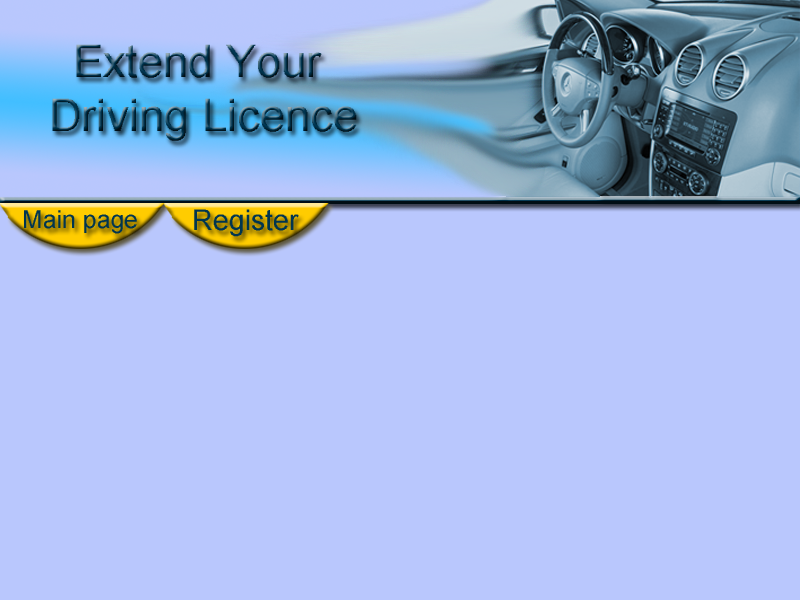
<style>
.page{position:relative;width:800px;height:600px;background:#b9c7fd}
.page>*{position:absolute;margin:0}
.t1{font:45px "MS Dialog Light"}
.t2{font:28.5px "MS Dialog Light";color:#003550}
.t3{font:24.6px "MS Dialog Light";color:#003550}
</style>
<div class="page">
<p class="t1" style="left:52px;top:44px;width:305px;height:97px;text-align:center">Extend Your <br>Driving Licence</p>
<p class="t2" style="left:194px;top:209px;width:105px;height:28px">Register</p>
<p class="t3" style="left:24px;top:210px;width:113px;height:24px">Main page</p>
</div>
